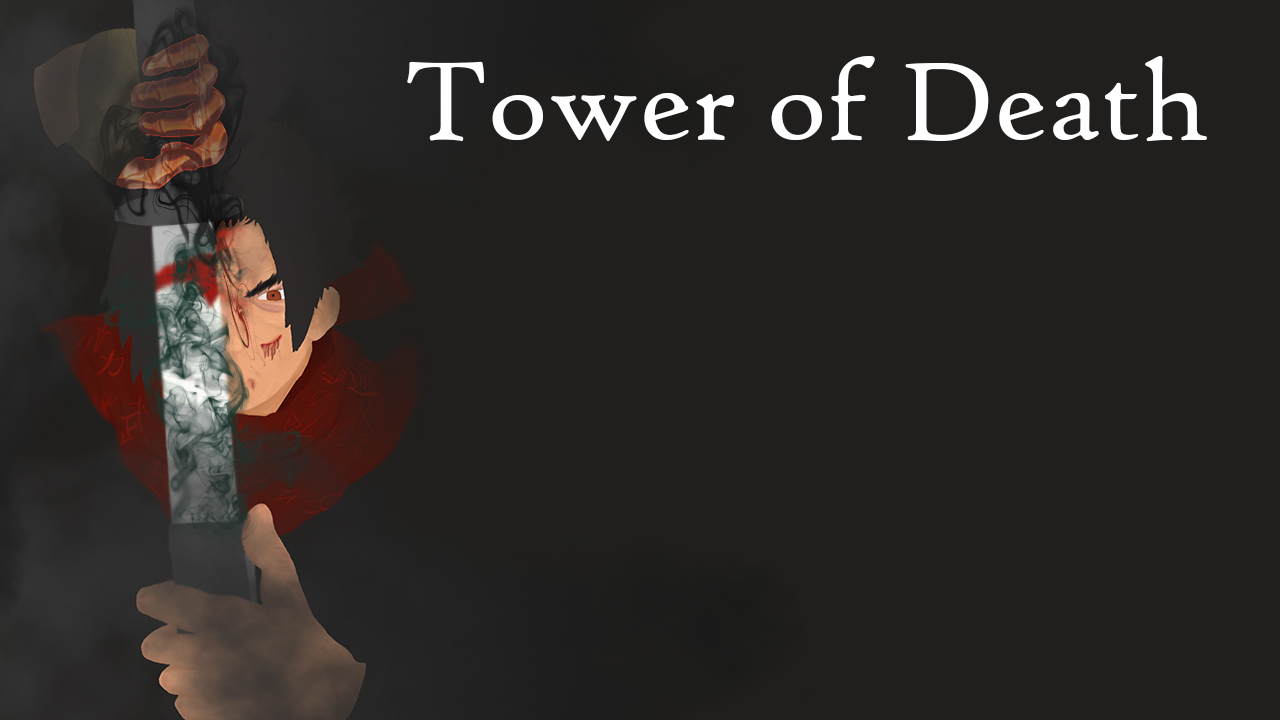
<style>
.page{position:relative;width:1280px;height:720px;background:#201f1d}
.page>*{position:absolute;margin:0}
.t1{font:120px "HighTowerText-Reg";color:#ffffff}
</style>
<div class="page">
<p class="t1" style="left:407px;top:56px;width:800px;height:86px">Tower of Death</p>
</div>
